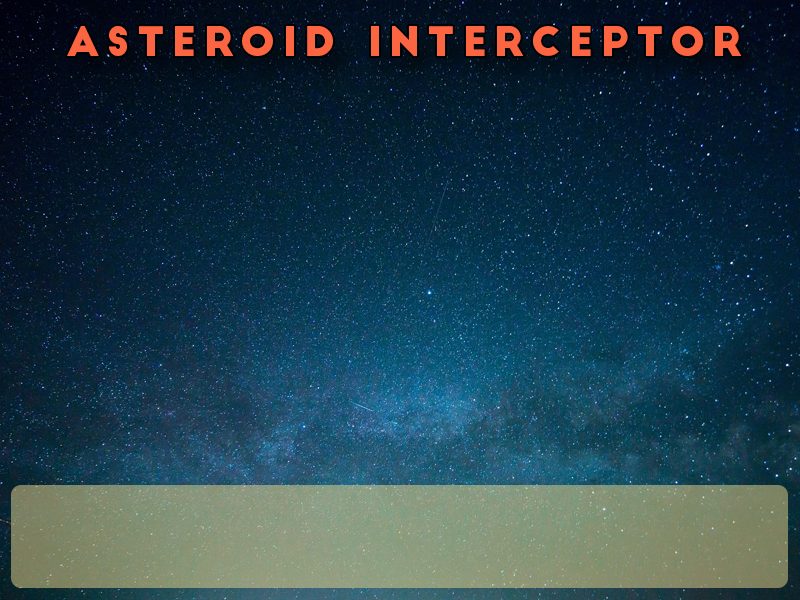
<style>
.page{position:relative;width:800px;height:600px}
.page>*{position:absolute;margin:0}
.t1{font:40px "BigJohn";letter-spacing:0.18em;color:#fb6542}
</style>
<div class="page">
<p class="t1" style="left:67px;top:26px;width:675px;height:30px">Asteroid Interceptor</p>
</div>
